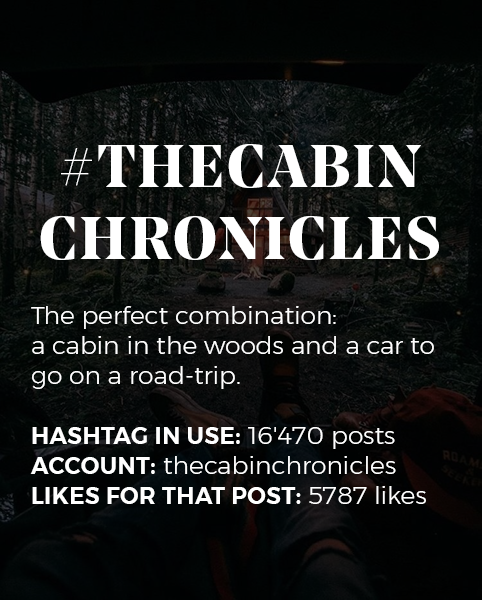
<style>
.page{position:relative;width:482px;height:600px}
.page>*{position:absolute;margin:0}
.t1{font:25px "Montserrat-Light";color:#ffffff}
.t2{font:60px "NoeDisplay-Bold";letter-spacing:0.05em;color:#ffffff;text-transform:uppercase}
.t3{font:23px "Montserrat-SemiBold";letter-spacing:0.02em;color:#ffffff;text-transform:uppercase}
</style>
<div class="page">
<p class="t1" style="left:30px;top:144px;width:409px;height:360px;text-align:center"><span class="t2">#thecabin<br>chronicles<br><br></span>The perfect combination: <br>a cabin in the woods and a car to go on a road-trip.<br><br><span class="t3">Hashtag in use:</span> 16'470 posts<br><span class="t3">Account:</span> thecabinchronicles<br><span class="t3">likes for that post: </span>5787 likes</p>
</div>
